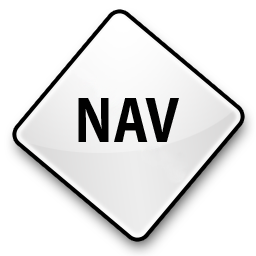
<style>
.page{position:relative;width:256px;height:256px;background:#ffffff}
.page>*{position:absolute;margin:0}
.t1{font:66px "MyriadPro-Bold";letter-spacing:0.005em;color:#010101;scale:0.82 1}
</style>
<div class="page">
<p class="t1" style="left:78px;top:98px;width:101px;height:44px">NAV</p>
</div>
